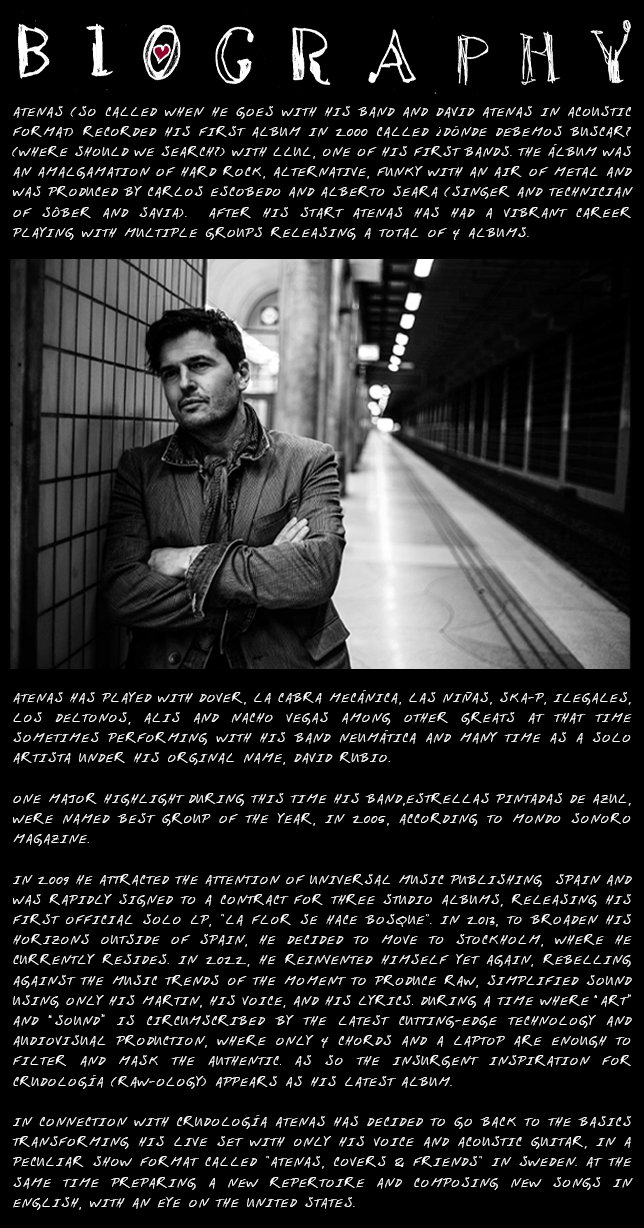
<style>
.page{position:relative;width:644px;height:1228px;background:#000000}
.page>*{position:absolute;margin:0}
.t1{font:14px/20.2px "WinstonsHand-Plain";color:#ffffff;text-transform:uppercase}
</style>
<div class="page">
<p class="t1" style="left:12px;top:106px;width:621px;height:1104px;text-align:justify">Atenas (so called when he goes with his band and David Atenas in acoustic format) recorded his first album in 2000 called ¿Dónde debemos buscar? (Where should we search?) with Llul, one of his first bands. The álbum was an amalgamation of hard rock, alternative, funky with an air of metal and was produced by Carlos Escobedo and Alberto Seara (singer and technician of Sôber and Savia).  After his start Atenas has had a vibrant career playing with multiple groups releasing a total of 4 albums.<br><br><br><br><br><br><br><br><br><br><br><br><br><br><br><br><br><br><br><br><br><br><br>Atenas has played with Dover, La Cabra Mecánica, Las Niñas, SKA-P, Ilegales, Los Deltonos, Alis and Nacho Vegas among other greats at that time sometimes performing with his band Neumática and many time as a solo artista under his orginal name, David Rubio.<br><br>One major highlight during this time his band,Estrellas Pintadas De Azul, were named best group of the year, in 2005, according to Mondo Sonoro magazine.<br><br>In 2009 he attracted the attention of Universal Music Publishing  Spain and was rapidly signed to a contract for three studio albums, releasing his first official solo LP, "La flor se hace bosque". In 2013, to broaden his horizons outside of Spain, he decided to move to Stockholm, where he currently resides. In 2022, he reinvented himself yet again, rebelling against the music trends of the moment to produce raw, simplified sound using only his Martin, his voice, and his lyrics. During a time where “art” and “sound” is circumscribed by the latest cutting-edge technology and audiovisual production, where only 4 chords and a laptop are enough to filter and mask the authentic. As so the insurgent inspiration for Crudología (Raw-ology) appears as his latest album. <br><br>In connection with Crudología Atenas has decided to go back to the basics transforming his live set with only his voice and acoustic guitar, in a peculiar show format called "Atenas, covers &amp; friends" in Sweden. At the same time preparing a new repertoire and composing new songs in English, with an eye on the United States.</p>
</div>
